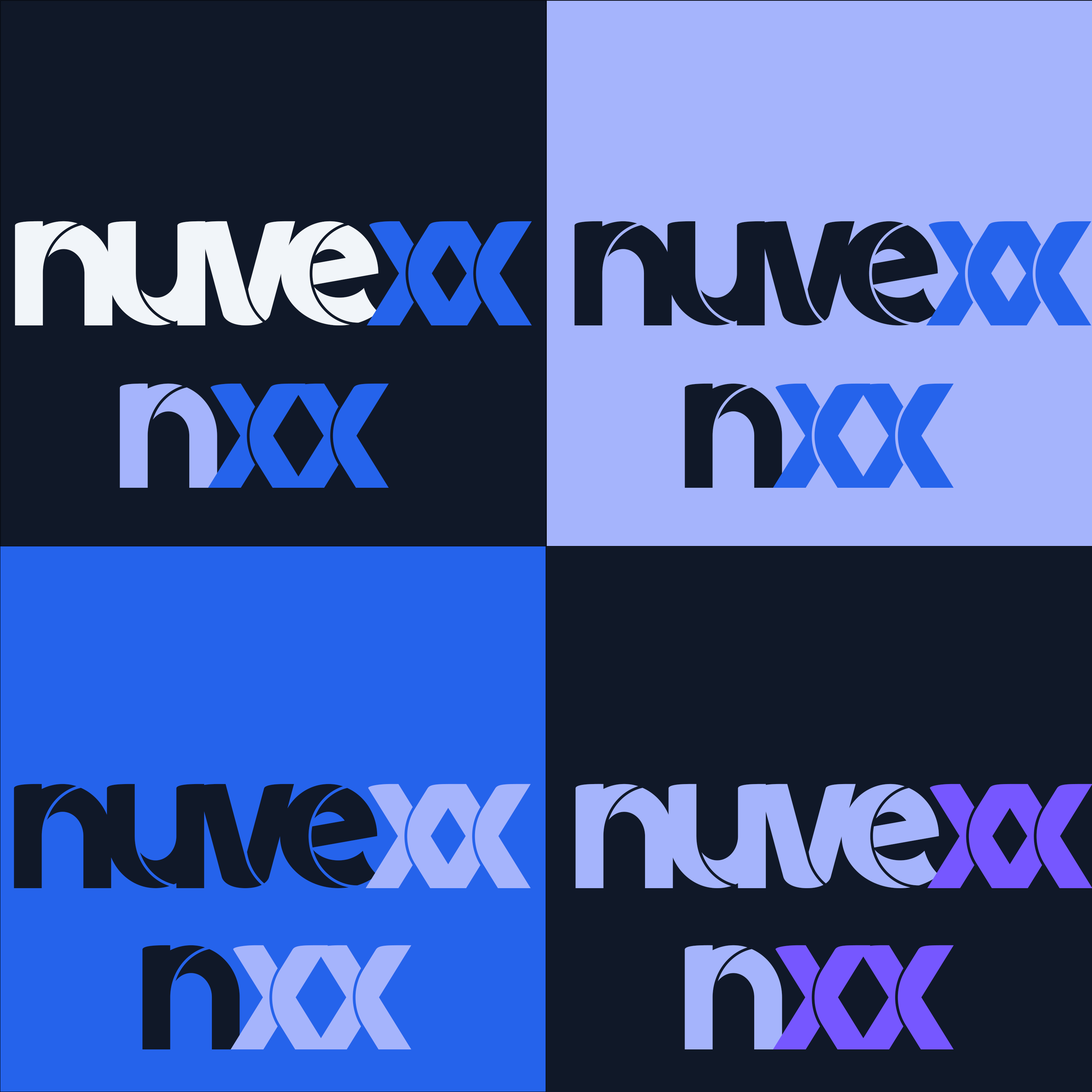
<style>
.page{position:relative;width:1092px;height:1092px;background:#101828}
.page>*{position:absolute;margin:0}
.t1{font:198.4px "SoccosRegular";letter-spacing:-0.08em;color:#f1f5f9}
.t2{font:198.4px "SoccosRegular";letter-spacing:-0.16em;color:#2563eb}
.t3{font:198.4px "SoccosRegular";letter-spacing:-0.08em;color:#101828}
.t4{font:198.4px "SoccosRegular";letter-spacing:-0.08em;color:#2563eb}
.t5{font:198.4px "SoccosRegular";letter-spacing:-0.08em;color:#a5b4fc}
.t6{font:198.4px "SoccosRegular";letter-spacing:-0.16em;color:#a5b4fc}
.t7{font:198.4px "SoccosRegular";letter-spacing:-0.16em;color:#7657ff}
.t8{font:198.4px "SoccosRegular";letter-spacing:-0.08em;color:#7657ff}
</style>
<div class="page">
<p class="t1" style="left:15px;top:221px;width:517px;height:104px">nuve<span class="t2">xx</span></p>
<p class="t3" style="left:574px;top:221px;width:517px;height:104px">nuve<span class="t2">xx</span></p>
<p class="t4" style="left:120px;top:383px;width:269px;height:105px"><span class="t5">n</span>xx</p>
<p class="t4" style="left:685px;top:383px;width:269px;height:105px"><span class="t3">n</span>xx</p>
<p class="t3" style="left:14px;top:784px;width:517px;height:104px">nuve<span class="t6">xx</span></p>
<p class="t5" style="left:575px;top:784px;width:517px;height:104px">nuve<span class="t7">xx</span></p>
<p class="t5" style="left:142px;top:945px;width:269px;height:104px"><span class="t3">n</span>xx</p>
<p class="t8" style="left:685px;top:945px;width:269px;height:104px"><span class="t5">n</span>xx</p>
</div>
